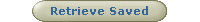
<style>
.page{position:relative;width:200px;height:22px;background:#ffffff}
.page>*{position:absolute;margin:0}
.t1{font:11px "Verdana-Bold";color:#336699}
</style>
<div class="page">
<p class="t1" style="left:51px;top:6px;width:97px;height:9px">Retrieve Saved</p>
</div>
